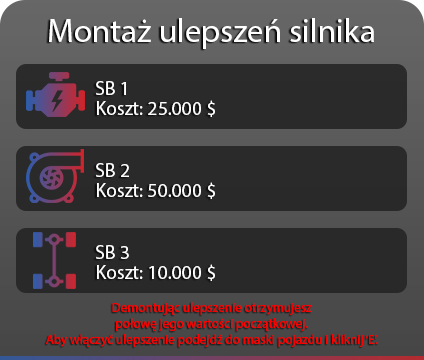
<style>
.page{position:relative;width:424px;height:360px;background:#292929}
.page>*{position:absolute;margin:0}
.t1{font:33.1px "MyriadPro-Regular";color:#ffffff}
.t2{font:19.6px "MyriadPro-Regular";color:#ffffff}
.t3{font:13.2px "MyriadPro-Regular";color:#ff0000}
</style>
<div class="page">
<p class="t1" style="left:49px;top:18px;width:325px;height:31px">Montaż ulepszeń silnika</p>
<p class="t2" style="left:96px;top:81px;width:30px;height:14px">SB 1</p>
<p class="t2" style="left:97px;top:100px;width:118px;height:17px">Koszt: 25.000 $</p>
<p class="t2" style="left:96px;top:163px;width:33px;height:14px">SB 2</p>
<p class="t2" style="left:97px;top:182px;width:118px;height:17px">Koszt: 50.000 $</p>
<p class="t2" style="left:96px;top:245px;width:33px;height:14px">SB 3</p>
<p class="t2" style="left:97px;top:264px;width:118px;height:17px">Koszt: 10.000 $</p>
<p class="t3" style="left:46px;top:302px;width:332px;height:45px;text-align:center">Demontując ulepszenie otrzymujesz<br>połowę jego wartości początkowej.<br>Aby włączyć ulepszenie podejdź do maski pojazdu i kliknij ‘E’.</p>
</div>
